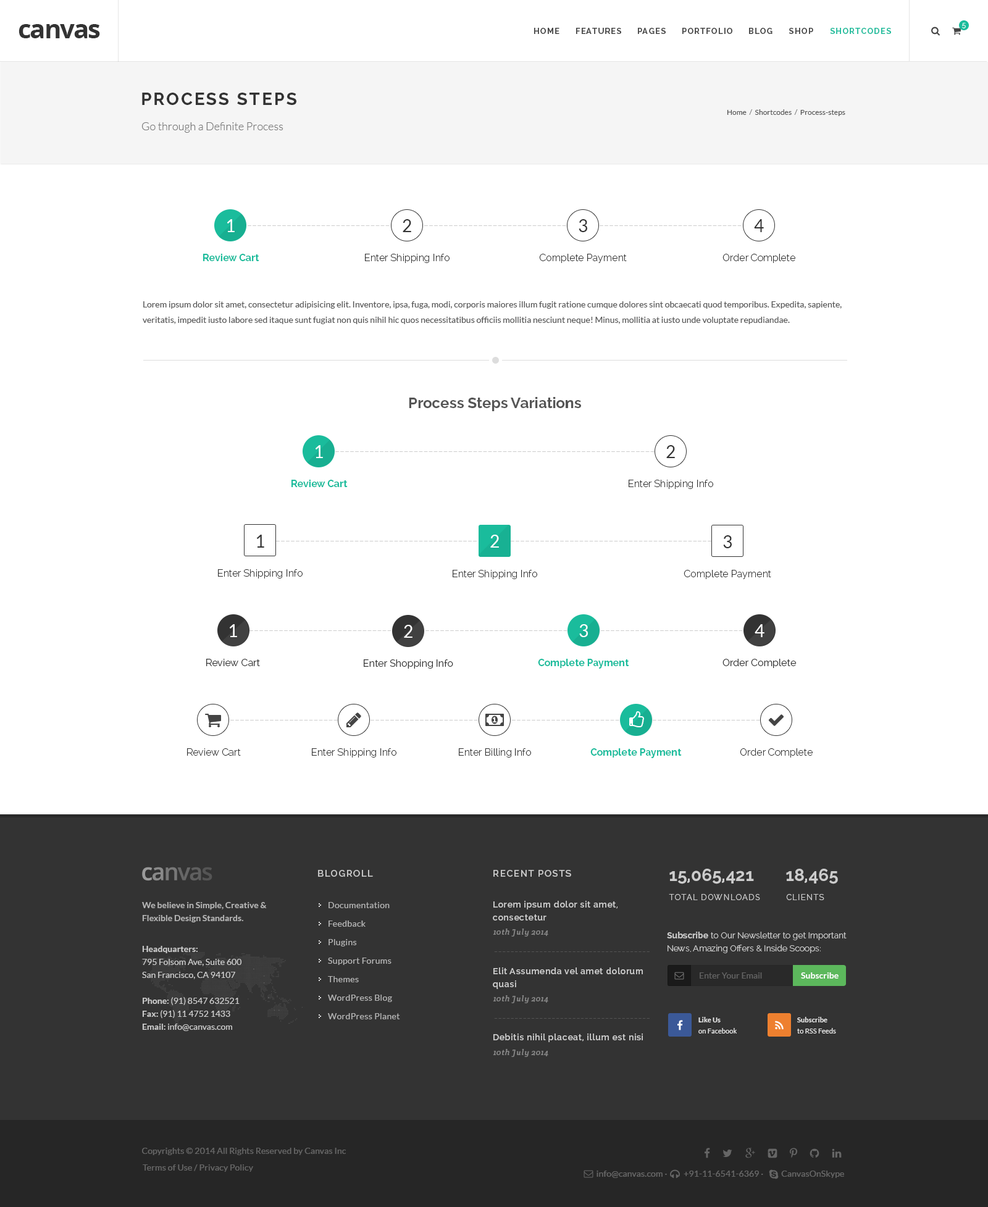
<style>
.page{position:relative;width:988px;height:1207px;background:#ffffff}
.page>*{position:absolute;margin:0}
.t1{font:25.9px "OpenSans-Bold";letter-spacing:-0.05em;color:#333333}
.t2{font:8px "Raleway-Bold";letter-spacing:0.1em;color:#444444}
.t3{font:8px "Raleway-Bold";letter-spacing:0.1em;color:#1abc9c}
.t4{font:6.8px "Raleway-Light";letter-spacing:0.1em;color:#ffffff}
.t5{font:17.3px "Raleway-Bold";letter-spacing:0.1em;color:#333333;text-transform:uppercase}
.t6{font:7.4px "Lato-Regular";color:#555555}
.t7{font:7.4px "Lato-Regular";color:#777777}
.t8{font:11.1px "Lato-Light";color:#777777}
.t9{font:17.3px "Lato-Regular";letter-spacing:0.1em;color:#ffffff;text-transform:uppercase}
.t10{font:17.3px "Lato-Regular";letter-spacing:0.1em;color:#333333;text-transform:uppercase}
.t11{font:14.8px "Lato-Light";color:#cccccc}
.t12{font:9.9px "Raleway-Bold";color:#1abc9c}
.t13{font:9.9px "Raleway-Light";color:#333333}
.t14{font:8.6px/15.4px "Lato-Regular";color:#555555}
.t15{font:14.8px "Raleway-Bold";color:#555555}
.t16{font:9.9px "Raleway-Regular";color:#333333}
.t17{font:9.3px "Raleway-SemiBold";letter-spacing:0.1em;color:#cccccc}
.t18{font:17.3px "Raleway-Bold";color:#cccccc}
.t19{font:8.6px/13px "Lato-Bold";color:#cccccc}
.t20{font:8.6px/18.5px "Lato-Regular";letter-spacing:0.025em;color:#cccccc}
.t21{font:8.6px/13px "Raleway-SemiBold";letter-spacing:0.05em;color:#cccccc}
.t22{font:8px "Raleway-Regular";letter-spacing:0.1em;color:#cacaca;text-transform:uppercase}
.t23{font:8px "CreteRound-Italic";letter-spacing:0.05em;color:#888888}
.t24{font:8.6px/13px "Raleway-Light";color:#cccccc}
.t25{font:8.6px/13px "Raleway-Bold";color:#cccccc}
.t26{font:8.6px/13px "Lato-Regular";color:#cccccc}
.t27{font:11.1px "Lato-Italic";letter-spacing:0.05em;color:#545454}
.t28{font:8.6px "Lato-Regular";color:#777777}
.t29{font:8.6px "Lato-Bold";color:#ffffff}
.t30{font:6.8px/11.1px "Lato-Regular";letter-spacing:0.01em;color:#eeeeee}
.t31{font:6.8px/11.1px "Lato-Bold";letter-spacing:0.01em;color:#eeeeee}
.t32{font:8.6px "Raleway-SemiBold";letter-spacing:0.05em;color:#cccccc}
.t33{font:8.6px "Lato-Regular";letter-spacing:0.01em;color:#666666}
</style>
<div class="page">
<p class="t1" style="left:19px;top:24px;width:81px;height:14px">canvas</p>
<p class="t2" style="left:534px;top:28px;width:25px;height:6px">HOME</p>
<p class="t2" style="left:576px;top:28px;width:45px;height:6px">FEATURES</p>
<p class="t2" style="left:638px;top:28px;width:28px;height:6px">PAGES</p>
<p class="t2" style="left:682px;top:28px;width:50px;height:6px">PORTFOLIO</p>
<p class="t2" style="left:749px;top:28px;width:23px;height:6px">BLOG</p>
<p class="t2" style="left:789px;top:28px;width:24px;height:6px">SHOP</p>
<p class="t3" style="left:830px;top:28px;width:61px;height:6px">SHORTCODES</p>
<p class="t4" style="left:962px;top:23px;width:4px;height:5px">5</p>
<p class="t5" style="left:142px;top:93px;width:154px;height:12px">Process Steps</p>
<p class="t6" style="left:727px;top:109px;width:118px;height:7px">Home  <span class="t7">/ </span> Shortcodes  <span class="t7">/ </span> Process-steps</p>
<p class="t8" style="left:142px;top:122px;width:141px;height:11px">Go through a Definite Process</p>
<p class="t9" style="left:227px;top:219px;width:8px;height:13px">1</p>
<p class="t10" style="left:403px;top:219px;width:8px;height:13px">2</p>
<p class="t10" style="left:579px;top:219px;width:8px;height:13px">3</p>
<p class="t10" style="left:754px;top:219px;width:10px;height:13px">4</p>
<p class="t11" style="left:248px;top:225px;width:142px;height:1px">-----------------------------</p>
<p class="t11" style="left:424px;top:225px;width:142px;height:1px">-----------------------------</p>
<p class="t11" style="left:600px;top:225px;width:142px;height:1px">-----------------------------</p>
<p class="t12" style="left:203px;top:254px;width:56px;height:7px">Review Cart</p>
<p class="t13" style="left:365px;top:254px;width:84px;height:9px">Enter Shipping Info</p>
<p class="t13" style="left:539px;top:254px;width:88px;height:9px">Complete Payment</p>
<p class="t13" style="left:722px;top:254px;width:73px;height:9px">Order Complete</p>
<p class="t14" style="left:143px;top:301px;width:699px;height:23px">Lorem ipsum dolor sit amet, consectetur adipisicing elit. Inventore, ipsa, fuga, modi, corporis maiores illum fugit ratione cumque dolores sint obcaecati quod temporibus. Expedita, sapiente,<br>veritatis, impedit iusto labore sed itaque sunt fugiat non quis nihil hic quos necessitatibus officiis mollitia nesciunt neque! Minus, mollitia at iusto unde voluptate repudiandae.</p>
<p class="t15" style="left:409px;top:397px;width:172px;height:14px">Process Steps Variations</p>
<p class="t9" style="left:316px;top:445px;width:7px;height:13px">1</p>
<p class="t10" style="left:666px;top:445px;width:9px;height:13px">2</p>
<p class="t11" style="left:335px;top:451px;width:319px;height:1px">-----------------------------------------------------------------</p>
<p class="t12" style="left:291px;top:480px;width:57px;height:7px">Review Cart</p>
<p class="t13" style="left:629px;top:480px;width:84px;height:9px">Enter Shipping Info</p>
<p class="t10" style="left:257px;top:535px;width:7px;height:13px">1</p>
<p class="t11" style="left:276px;top:541px;width:201px;height:0px">-----------------------------------------</p>
<p class="t9" style="left:490px;top:535px;width:9px;height:13px">2</p>
<p class="t11" style="left:511px;top:541px;width:200px;height:0px">-----------------------------------------</p>
<p class="t10" style="left:723px;top:535px;width:9px;height:13px">3</p>
<p class="t13" style="left:218px;top:569px;width:85px;height:10px">Enter Shipping Info</p>
<p class="t13" style="left:453px;top:570px;width:84px;height:9px">Enter Shipping Info</p>
<p class="t13" style="left:683px;top:570px;width:88px;height:9px">Complete Payment</p>
<p class="t9" style="left:230px;top:624px;width:7px;height:13px">1</p>
<p class="t9" style="left:404px;top:625px;width:8px;height:13px">2</p>
<p class="t9" style="left:579px;top:624px;width:9px;height:13px">3</p>
<p class="t9" style="left:754px;top:624px;width:10px;height:13px">4</p>
<p class="t11" style="left:249px;top:630px;width:142px;height:1px">-----------------------------</p>
<p class="t11" style="left:425px;top:630px;width:142px;height:1px">-----------------------------</p>
<p class="t11" style="left:601px;top:630px;width:142px;height:1px">-----------------------------</p>
<p class="t16" style="left:206px;top:659px;width:54px;height:7px">Review Cart</p>
<p class="t16" style="left:364px;top:659px;width:89px;height:10px">Enter Shopping Info</p>
<p class="t12" style="left:538px;top:659px;width:91px;height:10px">Complete Payment</p>
<p class="t16" style="left:722px;top:659px;width:74px;height:9px">Order Complete</p>
<p class="t11" style="left:230px;top:720px;width:108px;height:1px">----------------------</p>
<p class="t11" style="left:370px;top:720px;width:108px;height:1px">----------------------</p>
<p class="t11" style="left:512px;top:720px;width:107px;height:1px">----------------------</p>
<p class="t11" style="left:653px;top:720px;width:107px;height:1px">----------------------</p>
<p class="t13" style="left:187px;top:748px;width:54px;height:8px">Review Cart</p>
<p class="t13" style="left:312px;top:748px;width:84px;height:10px">Enter Shipping Info</p>
<p class="t13" style="left:459px;top:748px;width:72px;height:10px">Enter Billing Info</p>
<p class="t12" style="left:590px;top:748px;width:92px;height:10px">Complete Payment</p>
<p class="t13" style="left:740px;top:748px;width:73px;height:10px">Order Complete</p>
<p class="t17" style="left:318px;top:870px;width:55px;height:7px">BLOGROLL</p>
<p class="t17" style="left:493px;top:870px;width:78px;height:7px">RECENT POSTS</p>
<p class="t18" style="left:669px;top:869px;width:85px;height:15px">15,065,421</p>
<p class="t18" style="left:786px;top:869px;width:52px;height:15px">18,465</p>
<p class="t19" style="left:142px;top:902px;width:125px;height:20px;opacity:0.8">We believe in Simple, Creative &amp;<br>Flexible Design Standards.</p>
<p class="t20" style="left:328px;top:902px;width:72px;height:117px;opacity:0.8">Documentation<br>Feedback<br>Plugins<br>Support Forums<br>Themes<br>WordPress Blog<br>WordPress Planet</p>
<p class="t21" style="left:493px;top:901px;width:124px;height:20px">Lorem ipsum dolor sit amet,<br>consectetur</p>
<p class="t22" style="left:669px;top:894px;width:91px;height:6px">TOTAL Downloads</p>
<p class="t22" style="left:786px;top:894px;width:38px;height:6px">CLIENTS</p>
<p class="t23" style="left:493px;top:929px;width:55px;height:8px">10th July 2014</p>
<p class="t24" style="left:667px;top:932px;width:179px;height:21px"><span class="t25">Subscribe</span> to Our Newsletter to get Important<br>News, Amazing Offers &amp; Inside Scoops:</p>
<p class="t26" style="left:142px;top:946px;width:100px;height:85px"><span class="t19">Headquarters:<br></span>795 Folsom Ave, Suite 600<br>San Francisco, CA 94107<br><span class="t19"><br>Phone: </span>(91) 8547 632521<br><span class="t19">Fax: </span>(91) 11 4752 1433<br><span class="t19">Email: </span>info@canvas.com</p>
<p class="t27" style="left:494px;top:951px;width:156px;height:1px">--------------------------------------</p>
<p class="t21" style="left:493px;top:968px;width:150px;height:21px">Elit Assumenda vel amet dolorum<br>quasi</p>
<p class="t28" style="left:700px;top:972px;width:62px;height:7px;opacity:0.7">Enter Your Email</p>
<p class="t29" style="left:801px;top:972px;width:37px;height:7px">Subscribe</p>
<p class="t23" style="left:493px;top:995px;width:55px;height:8px">10th July 2014</p>
<p class="t27" style="left:494px;top:1018px;width:156px;height:1px">--------------------------------------</p>
<p class="t30" style="left:698px;top:1017px;width:39px;height:17px"><span class="t31">Like Us<br></span>on Facebook</p>
<p class="t30" style="left:797px;top:1017px;width:39px;height:17px"><span class="t31">Subscribe<br></span>to RSS Feeds</p>
<p class="t32" style="left:493px;top:1034px;width:150px;height:8px">Debitis nihil placeat, illum est nisi</p>
<p class="t23" style="left:493px;top:1049px;width:55px;height:8px">10th July 2014</p>
<p class="t33" style="left:142px;top:1148px;width:204px;height:7px">Copyrights © 2014 All Rights Reserved by Canvas Inc</p>
<p class="t33" style="left:143px;top:1164px;width:110px;height:8px">Terms of Use / Privacy Policy</p>
<p class="t33" style="left:596px;top:1171px;width:248px;height:7px">info@canvas.com ·   +91-11-6541-6369 ·        CanvasOnSkype</p>
</div>
